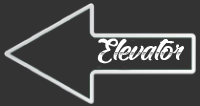
<style>
.page{position:relative;width:200px;height:106px;background:#333333}
.page>*{position:absolute;margin:0}
.t1{font:26.5px "Reality-Sunday";color:#ffffff}
</style>
<div class="page">
<p class="t1" style="left:97px;top:38px;width:87px;height:26px">Elevator</p>
</div>
